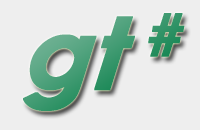
<style>
.page{position:relative;width:200px;height:130px;background:#eeeeee}
.page>*{position:absolute;margin:0}
.t1{font:100px "CenturyGothic-BoldItalic";letter-spacing:0.005em;font-weight:bold;font-style:italic}
</style>
<div class="page">
<p class="t1" style="left:23px;top:13px;width:162px;height:98px">gt #</p>
</div>
